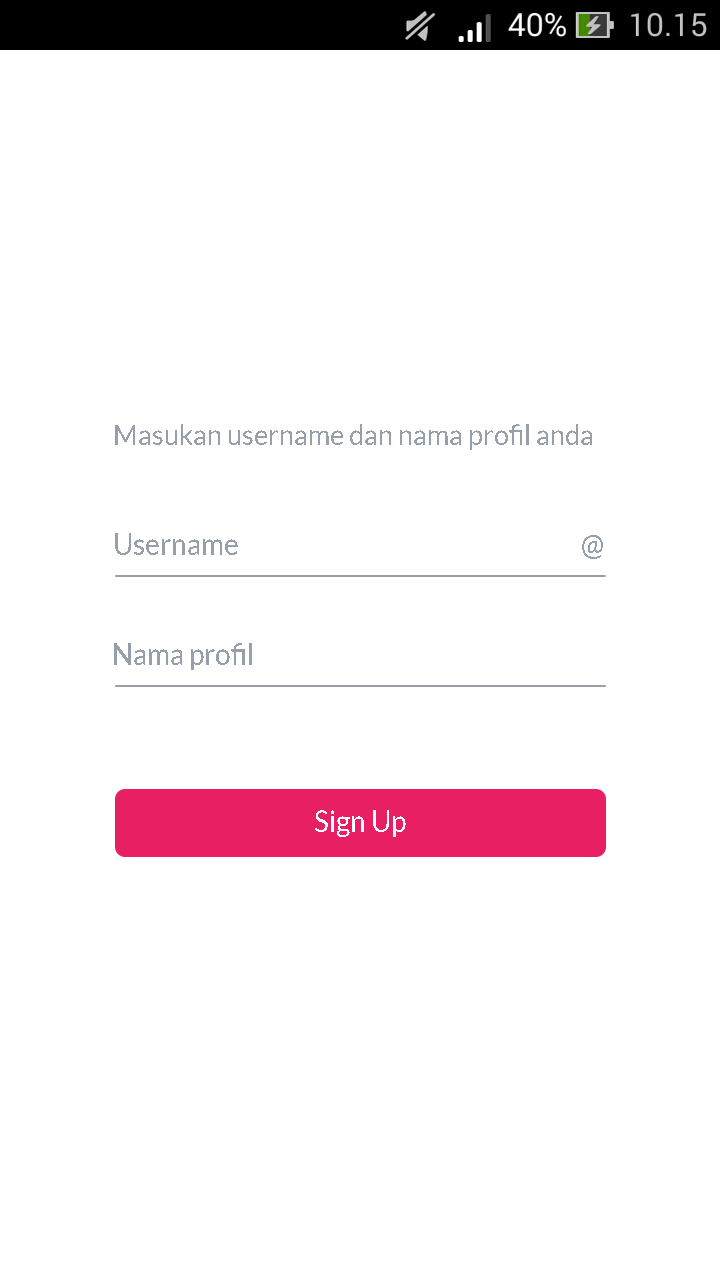
<style>
.page{position:relative;width:720px;height:1280px;background:#ffffff}
.page>*{position:absolute;margin:0}
.t1{font:28.3px "Lato-Regular";color:#969faa;scale:0.96 1}
.t2{font:29.1px "Lato-Regular";color:#969faa;scale:0.96 1}
.t3{font:29.2px "Lato-Regular";color:#969faa;scale:0.96 1}
.t4{font:29.2px "Lato-Regular";color:#ffffff;scale:0.96 1}
</style>
<div class="page">
<p class="t1" style="left:115px;top:424px;width:477px;height:26px">Masukan username dan nama profil anda</p>
<p class="t2" style="left:115px;top:533px;width:488px;height:26px">Username          @</p>
<p class="t3" style="left:114px;top:643px;width:138px;height:27px">Nama profil</p>
<p class="t4" style="left:315px;top:810px;width:91px;height:27px">Sign Up</p>
</div>
